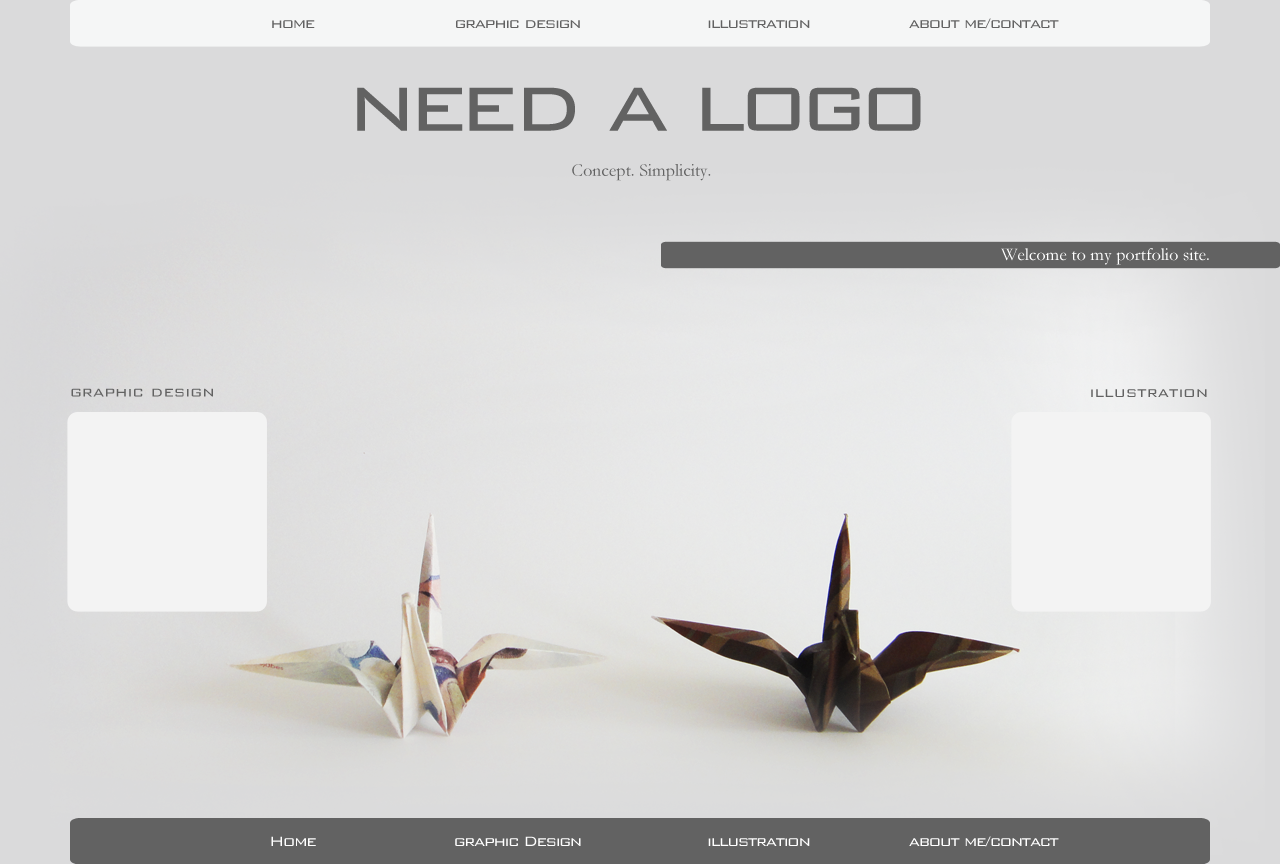
<style>
.page{position:relative;width:1280px;height:864px}
.page>*{position:absolute;margin:0}
.t1{font:18px "BankGothic-Light";letter-spacing:-0.075em;color:#626262}
.t2{font:100.7px "BankGothic-Light";letter-spacing:-0.075em;color:#626262}
.t3{font:18px "Garamond";color:#626262}
.t4{font:18px "Garamond";color:#ffffff}
.t5{font:18px "BankGothic-Light";color:#626262}
.t6{font:18px "BankGothic-Light";letter-spacing:-0.075em;color:#fefefe}
.t7{font:18px "BankGothic-Light";letter-spacing:-0.075em;color:#ffffff}
</style>
<div class="page">
<p class="t1" style="left:272px;top:20px;width:43px;height:8px">home</p>
<p class="t1" style="left:456px;top:20px;width:124px;height:8px">graphic design</p>
<p class="t1" style="left:708px;top:20px;width:102px;height:8px">illustration</p>
<p class="t1" style="left:909px;top:18px;width:150px;height:11px">about me/contact</p>
<p class="t2" style="left:357px;top:87px;width:564px;height:44px">need a logo</p>
<p class="t3" style="left:572px;top:164px;width:139px;height:17px">Concept. Simplicity.</p>
<p class="t4" style="left:1001px;top:248px;width:208px;height:17px">Welcome to my portfolio site.</p>
<p class="t5" style="left:71px;top:388px;width:142px;height:9px">graphic design</p>
<p class="t5" style="left:1091px;top:389px;width:116px;height:8px">illustration</p>
<p class="t6" style="left:271px;top:836px;width:45px;height:10px">Home</p>
<p class="t7" style="left:455px;top:836px;width:126px;height:10px">graphic Design</p>
<p class="t7" style="left:708px;top:838px;width:102px;height:8px">illustration</p>
<p class="t6" style="left:909px;top:836px;width:150px;height:11px">about me/contact</p>
</div>
